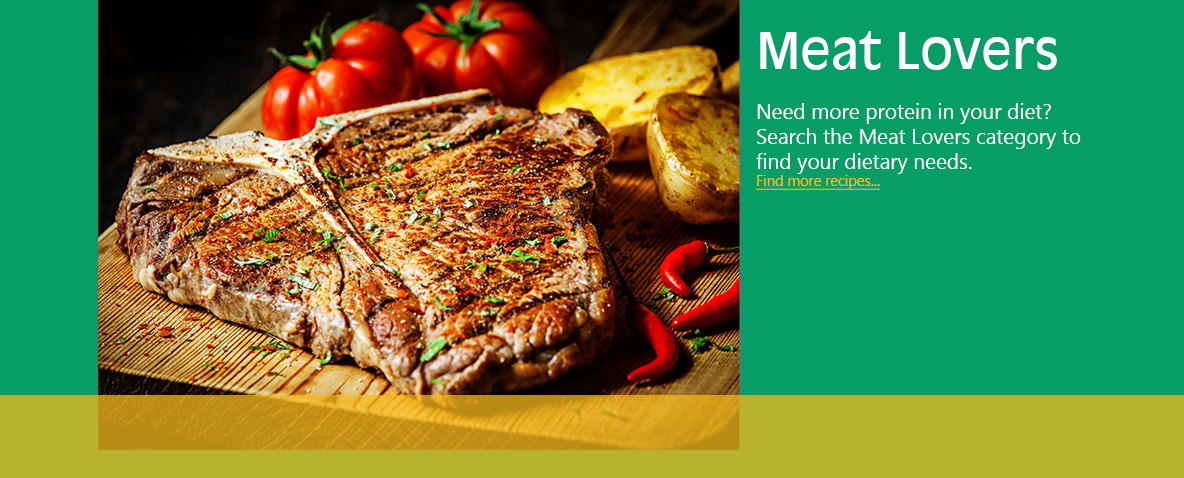
<style>
.page{position:relative;width:1184px;height:478px;background:#079d66}
.page>*{position:absolute;margin:0}
.t1{font:20.8px "MicrosoftTaiLe";color:#ffffff}
.t2{font:50px "AntiqueOlive-Roman";color:#ffffff}
.t3{font:14.6px "MicrosoftTaiLe";color:#f4b91b;text-decoration:underline}
</style>
<div class="page">
<p class="t1" style="left:756px;top:31px;width:325px;height:159px"><span class="t2">Meat Lovers<br></span><br>Need more protein in your diet? Search the Meat Lovers category to find your dietary needs.<br><span class="t3">Find more recipes...</span></p>
</div>
